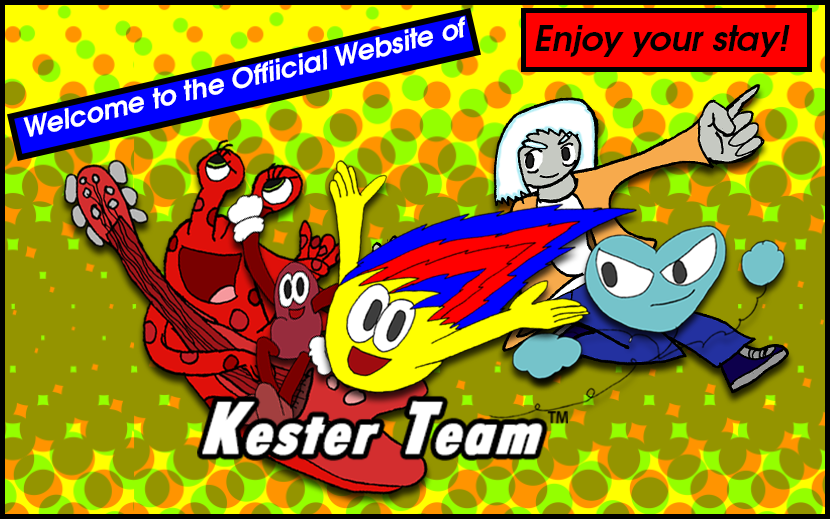
<style>
.page{position:relative;width:830px;height:519px;background:#949400}
.page>*{position:absolute;margin:0}
.t1{font:26.8px "TeXGyreAdventor-BoldItalic";color:#ffffff}
.t2{font:33.8px "TeXGyreAdventor-BoldItalic";color:#000000}
</style>
<div class="page">
<p class="t1" style="left:23px;top:16px;width:442px;height:121px;rotate:-13deg">Welcome to the Official Website of</p>
<p class="t2" style="left:535px;top:25px;width:255px;height:32px">Enjoy your stay!</p>
</div>
